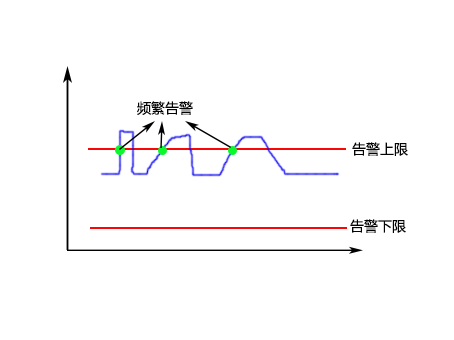
<style>
.page{position:relative;width:454px;height:340px;background:#ffffff}
.page>*{position:absolute;margin:0}
.t1{font:14px "MicrosoftYaHei";color:#030303}
</style>
<div class="page">
<p class="t1" style="left:137px;top:101px;width:56px;height:14px">频繁告警</p>
<p class="t1" style="left:352px;top:142px;width:56px;height:14px">告警上限</p>
<p class="t1" style="left:350px;top:219px;width:56px;height:14px">告警下限</p>
</div>
